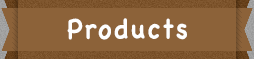
<style>
.page{position:relative;width:254px;height:59px;background:#8c6239}
.page>*{position:absolute;margin:0}
.t1{font:27.3px "Chalkboard";letter-spacing:0.075em;color:#fefefe;font-weight:bold;scale:0.95 1}
</style>
<div class="page">
<p class="t1" style="left:67px;top:18px;width:120px;height:22px">Products</p>
</div>
